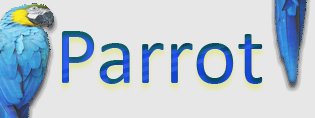
<style>
.page{position:relative;width:315px;height:118px;background:#e7e7e7}
.page>*{position:absolute;margin:0}
.t1{font:83.3px "Calibri";color:#e8e8e8}
</style>
<div class="page">
<p class="t1" style="left:62px;top:31px;width:201px;height:53px">Parrot</p>
</div>
